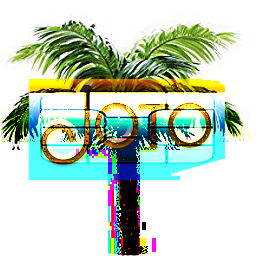
<style>
.page{position:relative;width:256px;height:256px;background:#ffffff}
.page>*{position:absolute;margin:0}
.t1{font:114px "BaroneysTextured"}
</style>
<div class="page">
<p class="t1" style="left:41px;top:85px;width:171px;height:80px">Joto</p>
</div>
